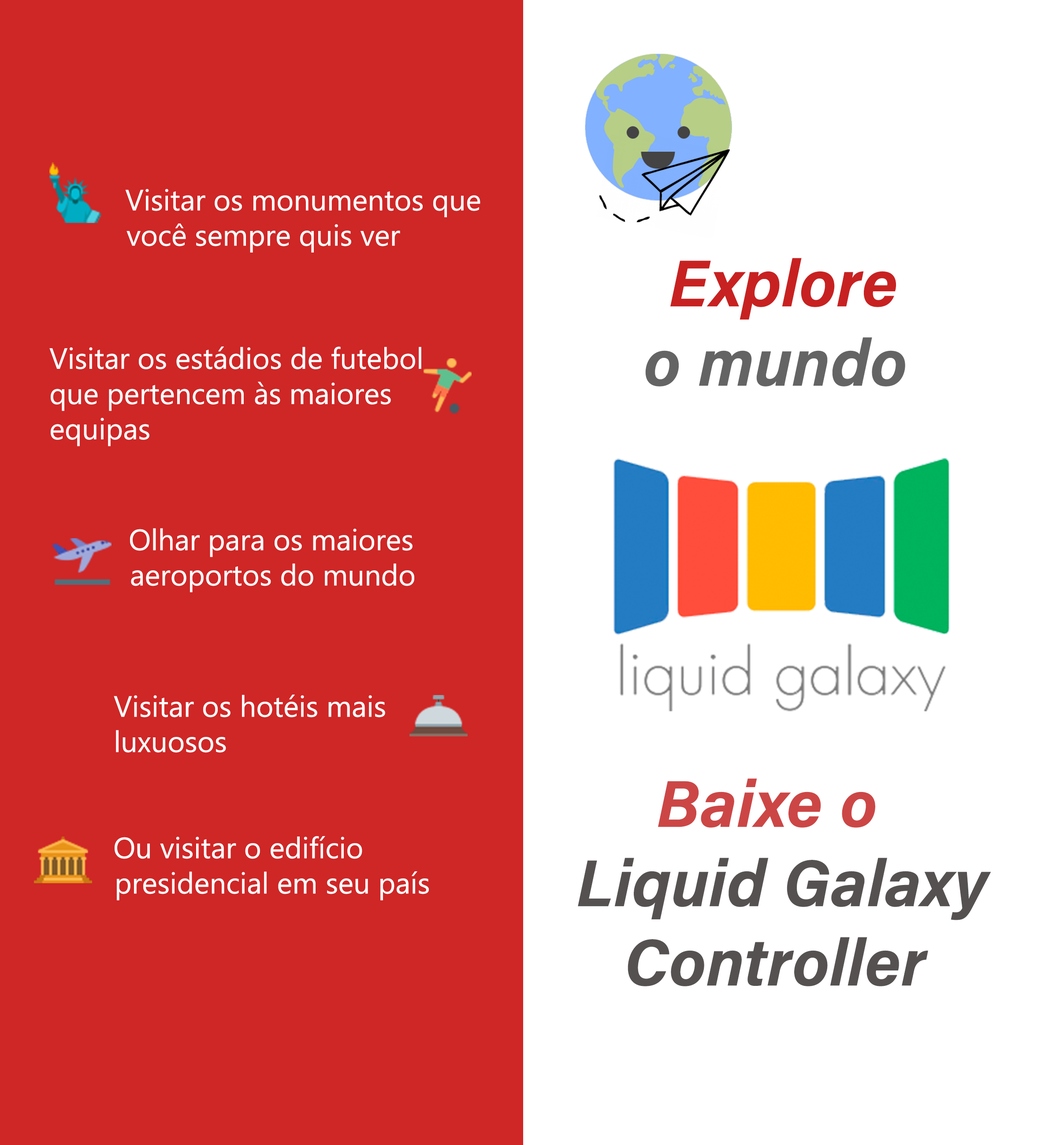
<style>
.page{position:relative;width:1041px;height:1145px;background:#cf2626}
.page>*{position:absolute;margin:0}
.t1{font:29.4px "MicrosoftPhagsPa";color:#ffffff}
.t2{font:66.1px "AcuminConcept-BoldItalic";color:#5d5d5d}
.t3{font:66.1px "AcuminConcept-BoldItalic";color:#c82121}
.t4{font:66.1px "Arial-BoldItalicMT";color:#646464}
.t5{font:66.1px "AcuminConcept-BoldItalic";color:#646464}
.t6{font:66.1px "AcuminConcept-BoldItalic";color:#565151}
.t7{font:66.1px "AcuminConcept-BoldItalic";color:#cc4646}
</style>
<div class="page">
<p class="t1" style="left:125px;top:189px;width:355px;height:64px"><span class="t2">      </span>Visitar os monumentos que  <br>            você sempre quis ver</p>
<p class="t3" style="left:645px;top:258px;width:260px;height:129px"><span class="t4"><br>    </span>Explore<span class="t5"> <br>   o mundo</span></p>
<p class="t1" style="left:49px;top:346px;width:372px;height:101px">Visitar os estádios de futebol <br>que pertencem às maiores equipas</p>
<p class="t1" style="left:130px;top:528px;width:284px;height:64px">Olhar para os maiores  <br>          aeroportos do mundo</p>
<p class="t1" style="left:114px;top:695px;width:271px;height:58px">Visitar os hotéis mais <br>       luxuosos</p>
<p class="t6" style="left:578px;top:778px;width:413px;height:209px"><span class="t7">       Baixe o   <br>  </span>Liquid Galaxy<br>     Controller</p>
<p class="t1" style="left:115px;top:836px;width:314px;height:65px">Ou visitar o edifício <br>          presidencial em seu país</p>
</div>
